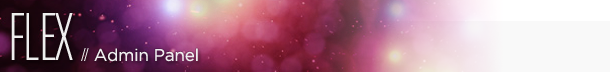
<style>
.page{position:relative;width:610px;height:72px}
.page>*{position:absolute;margin:0}
.t1{font:72px "ChaletComprime-MilanEighty";letter-spacing:-0.01em;color:#ffffff;text-transform:uppercase}
.t2{font:17px "GothamBook";letter-spacing:-0.01em;color:#ffffff}
.t3{font:48.2px "ChaletComprime-MilanEighty";letter-spacing:-0.01em;color:#ffffff;text-transform:uppercase}
.t4{font:18.5px "ChaletComprime-MilanEighty";letter-spacing:-0.01em;color:#ffffff;text-transform:uppercase}
</style>
<div class="page">
<p class="t1" style="left:11px;top:13px;width:62px;height:47px">FLEX</p>
<p class="t2" style="left:81px;top:48px;width:117px;height:14px"><span class="t3"> </span><span class="t4">//  </span>Admin Panel</p>
</div>
